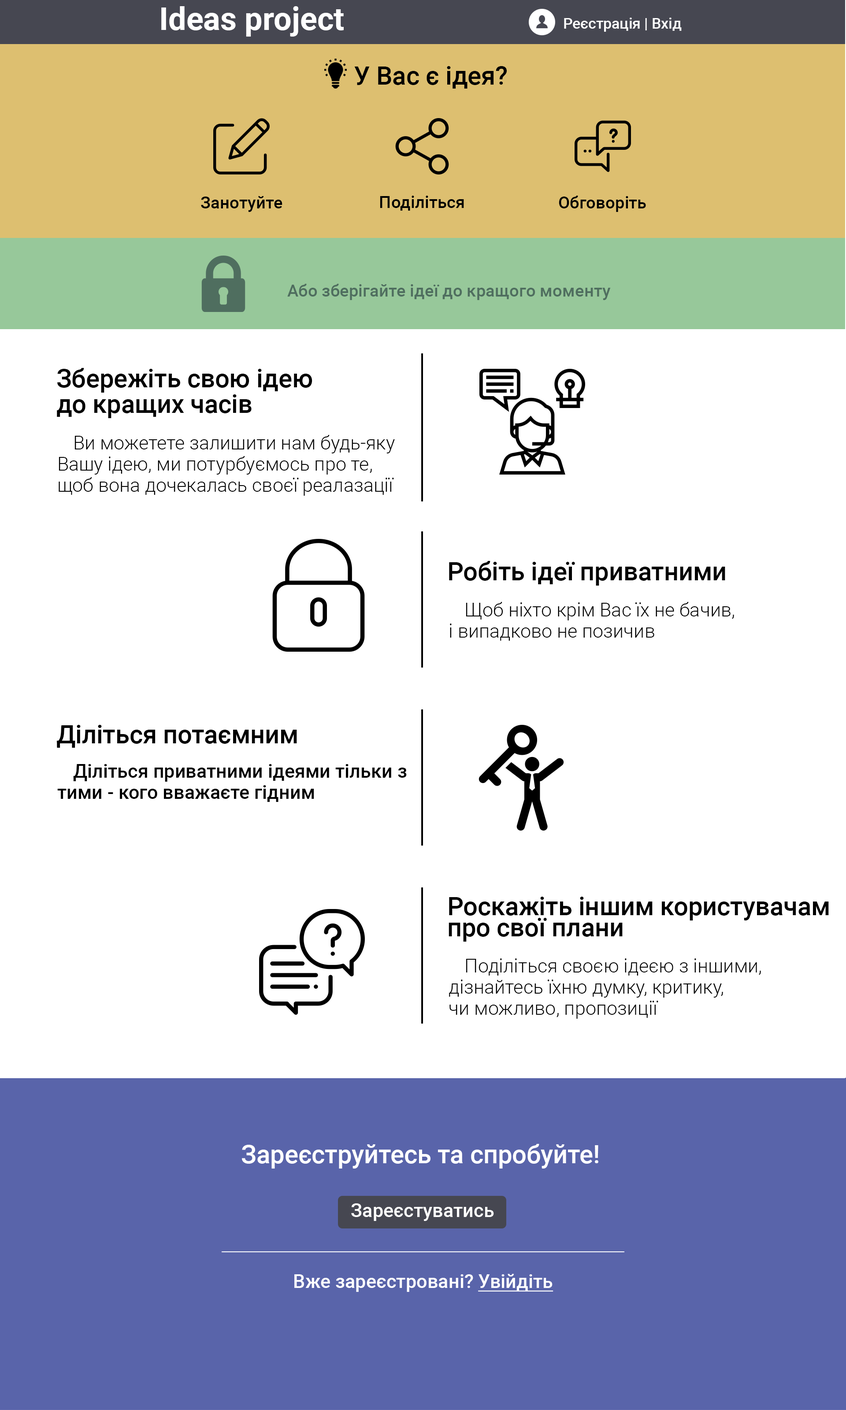
<style>
.page{position:relative;width:846px;height:1410px;background:#ffffff}
.page>*{position:absolute;margin:0}
.t1{font:31.7px "Roboto-Bold";color:#ffffff}
.t2{font:14.8px "Roboto-Medium";color:#ffffff}
.t3{font:25.4px "Roboto-Medium";color:#000000}
.t4{font:16.9px "Roboto-Medium";color:#000000}
.t5{font:16.9px "Roboto-Medium";color:#4f6e5f}
.t6{font:19px/21.1px "Roboto-Light";color:#000000}
.t7{font:19px/21.1px "Roboto-Medium";color:#000000}
.t8{font:25.4px/21.1px "Roboto-Medium";color:#000000}
.t9{font:25.4px "Roboto-Medium";color:#ffffff}
.t10{font:19px "Roboto-Medium";color:#ffffff}
.t11{font:19px "Roboto-Medium";color:#ffffff;text-decoration:underline}
</style>
<div class="page">
<p class="t1" style="left:161px;top:6px;width:183px;height:31px">Ideas project</p>
<p class="t2" style="left:564px;top:18px;width:118px;height:14px">Реєстрація | Вхід</p>
<p class="t3" style="left:354px;top:66px;width:153px;height:23px">У Вас є ідея?</p>
<p class="t4" style="left:201px;top:196px;width:81px;height:16px">Занотуйте</p>
<p class="t4" style="left:380px;top:196px;width:84px;height:15px">Поділіться</p>
<p class="t4" style="left:559px;top:196px;width:87px;height:16px">Обговоріть</p>
<p class="t5" style="left:287px;top:284px;width:324px;height:16px">Або зберігайте ідеї до кращого моменту</p>
<p class="t3" style="left:57px;top:368px;width:255px;height:50px">Збережіть свою ідею<br><br>до кращих часів</p>
<p class="t6" style="left:59px;top:435px;width:336px;height:61px"><span class="t7"><br></span> Ви можетете залишити нам будь-яку<br>Вашу ідею, ми потурбуємось про те,<br>щоб вона дочекалась своєї реалазації</p>
<p class="t3" style="left:449px;top:561px;width:276px;height:24px">Робіть ідеї приватними</p>
<p class="t6" style="left:450px;top:602px;width:284px;height:39px;text-align:justify">Щоб ніхто крім Вас їх не бачив,<br>і випадково не позичив</p>
<p class="t3" style="left:57px;top:725px;width:240px;height:23px">Діліться потаємним</p>
<p class="t7" style="left:57px;top:764px;width:350px;height:38px">Діліться приватними ідеями тільки з<br>тими - кого вважаєте гідним</p>
<p class="t8" style="left:448px;top:897px;width:381px;height:44px">Роскажіть іншим користувачам<br>про свої плани</p>
<p class="t6" style="left:449px;top:958px;width:312px;height:61px;text-align:justify">Поділіться своєю ідеєю з іншими, <br>дізнайтесь їхню думку, критику,<br>чи можливо, пропозиції<br><br>Або ж знайдіть однодумців</p>
<p class="t9" style="left:242px;top:1144px;width:356px;height:24px">Зареєструйтесь та спробуйте!</p>
<p class="t10" style="left:351px;top:1203px;width:143px;height:18px">Зареєстуватись</p>
<p class="t10" style="left:294px;top:1274px;width:259px;height:18px">Вже зареєстровані? <span class="t11">Увійдіть</span></p>
</div>
